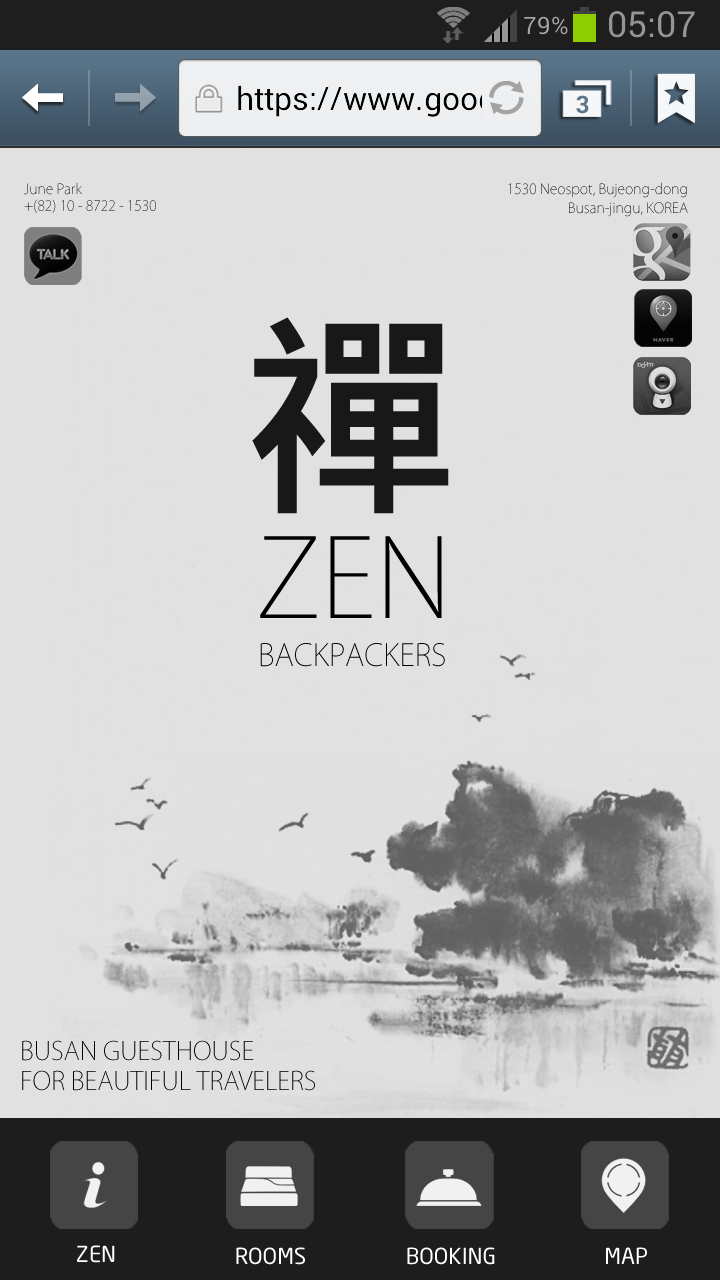
<style>
.page{position:relative;width:720px;height:1280px;background:#e1e1e1}
.page>*{position:absolute;margin:0}
.t1{font:14px "KozGoPro-ExtraLight"}
.t2{font:14px/19px "KozGoPro-ExtraLight"}
.t3{font:221px "MicrosoftJhengHeiBold";color:#181818}
.t4{font:108px "KozGoPro-ExtraLight";color:#000000}
.t5{font:30px "KozGoPro-ExtraLight";color:#000000}
.t6{font:25px "KozGoPro-ExtraLight";color:#000000}
.t7{font:22px "NeoTechDacia-Regular";color:#ffffff}
</style>
<div class="page">
<p class="t1" style="left:24px;top:182px;width:132px;height:31px">June Park<br>+(82) 10 - 8722 - 1530</p>
<p class="t2" style="left:508px;top:182px;width:180px;height:35px;text-align:right">1530 Neospot, Bujeong-dong<br>Busan-jingu, KOREA</p>
<p class="t3" style="left:252px;top:317px;width:197px;height:197px">禪</p>
<p class="t4" style="left:260px;top:536px;width:182px;height:82px">ZEN</p>
<p class="t5" style="left:260px;top:643px;width:185px;height:24px">BACKPACKERS</p>
<p class="t6" style="left:22px;top:1040px;width:293px;height:51px">BUSAN GUESTHOUSE<br>FOR BEAUTIFUL TRAVELERS</p>
<p class="t7" style="left:77px;top:1245px;width:38px;height:18px">ZEN</p>
<p class="t7" style="left:236px;top:1247px;width:69px;height:18px">ROOMS</p>
<p class="t7" style="left:407px;top:1247px;width:88px;height:18px">BOOKING</p>
<p class="t7" style="left:606px;top:1247px;width:41px;height:17px">MAP</p>
</div>
